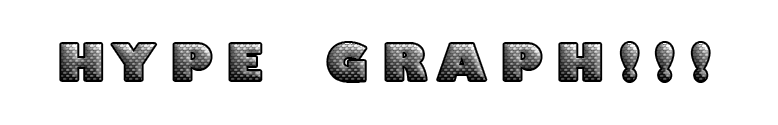
<style>
.page{position:relative;width:778px;height:125px;background:#ffffff}
.page>*{position:absolute;margin:0}
.t1{font:48px "GillSans-UltraBold"}
</style>
<div class="page">
<p class="t1" style="left:61px;top:43px;width:648px;height:38px">H Y P E    G R A P H ! ! !</p>
</div>
